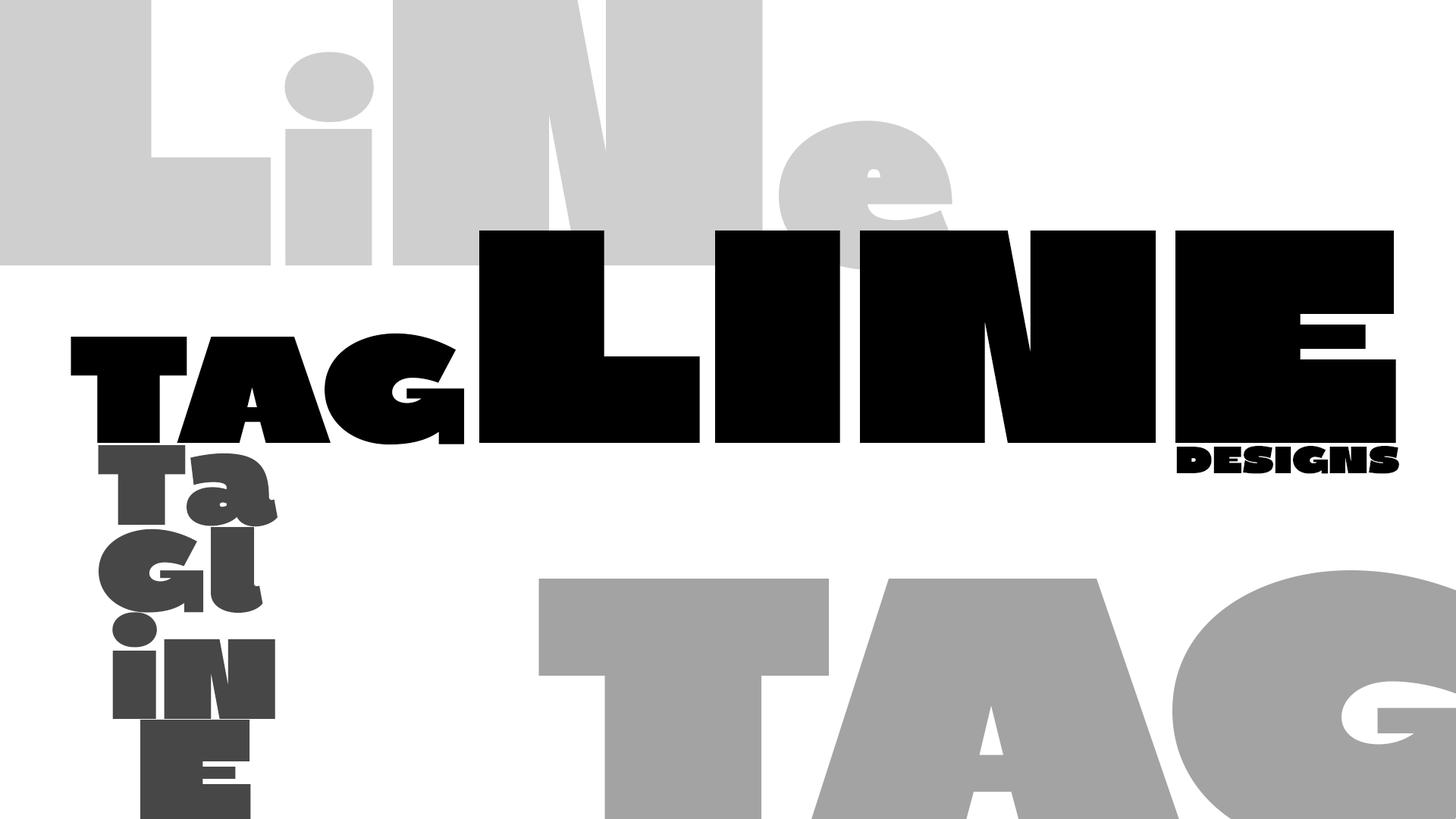
<style>
.page{position:relative;width:1456px;height:819px;background:#ffffff}
.page>*{position:absolute;margin:0}
.t1{font:303.3px "BPDiet-UltraBlack";color:#000000}
.t2{font:151.7px "BPDiet-UltraBlack";color:#000000}
.t3{font:113.7px "BPDiet-UltraBlack";color:#474747}
.t4{font:37.9px "BPDiet-UltraBlack";color:#000000}
</style>
<div class="page">
<p class="t1" style="left:71px;top:230px;width:1325px;height:215px"><span class="t2">TAG</span>LINE</p>
<p class="t3" style="left:98px;top:444px;width:180px;height:83px">Ta</p>
<p class="t4" style="left:1176px;top:446px;width:223px;height:28px">DESIGNS</p>
<p class="t3" style="left:99px;top:526px;width:164px;height:87px">Gl</p>
<p class="t3" style="left:112px;top:612px;width:163px;height:107px">iN</p>
</div>
